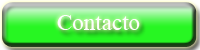
<style>
.page{position:relative;width:200px;height:50px}
.page>*{position:absolute;margin:0}
.t1{font:23px "TimesNewRomanPSMT";color:#fbfdfb}
</style>
<div class="page">
<p class="t1" style="left:57px;top:15px;width:83px;height:15px">Contacto</p>
</div>
